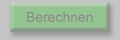
<style>
.page{position:relative;width:120px;height:40px;background:#94c591}
.page>*{position:absolute;margin:0}
.t1{font:14px "ArialMT";color:#8b898b}
</style>
<div class="page">
<p class="t1" style="left:27px;top:12px;width:66px;height:10px">Berechnen</p>
</div>
